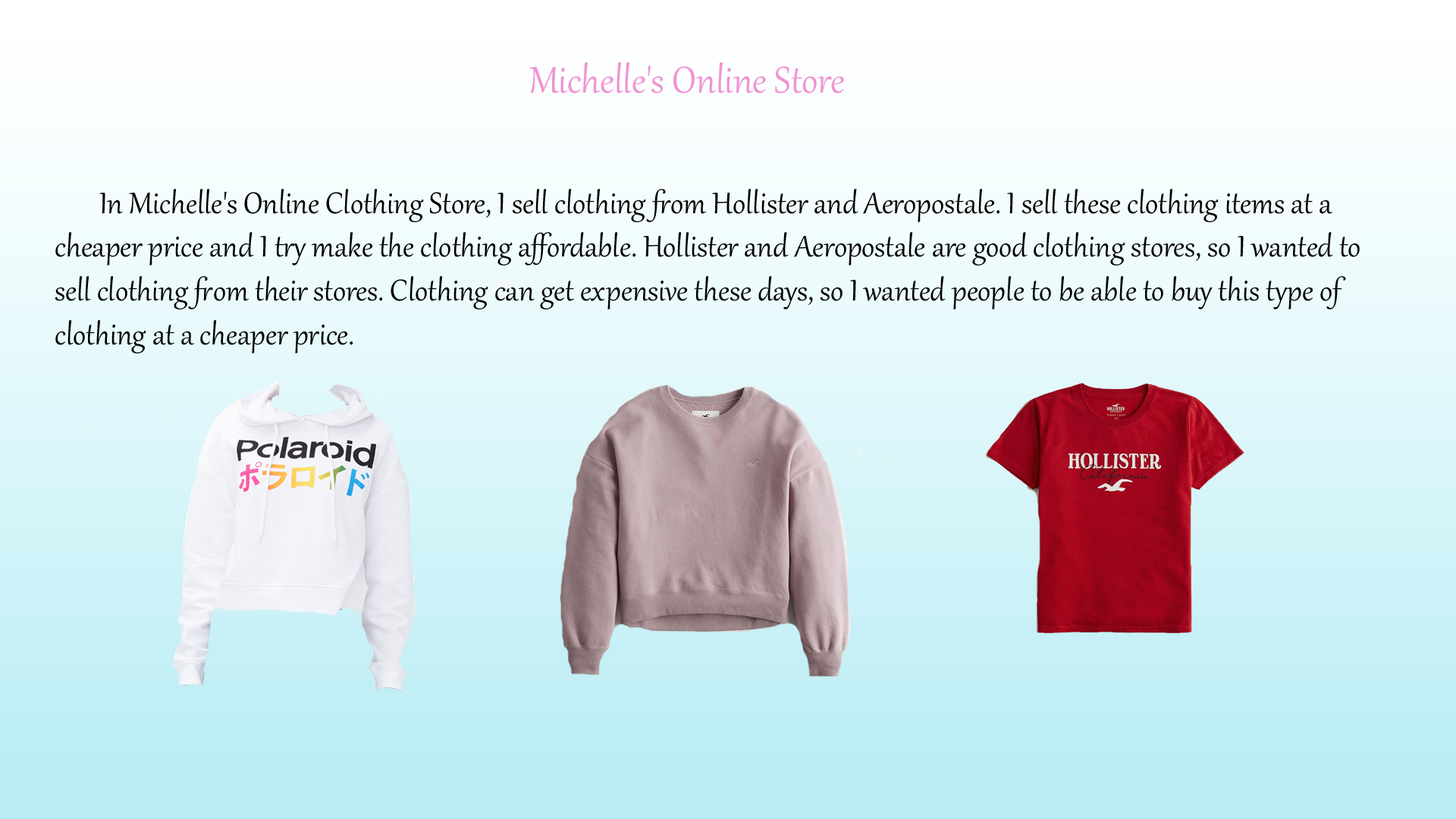
<style>
.page{position:relative;width:1456px;height:819px}
.page>*{position:absolute;margin:0}
.t1{font:45.5px "Gabriola";color:#f093d2}
.t2{font:45.5px "Gabriola";color:#000000}
.t3{font:36.4px "Gabriola";color:#000000}
</style>
<div class="page">
<p class="t1" style="left:529px;top:62px;width:315px;height:31px">Michelle's Online Store<br><span class="t2">O</span></p>
<p class="t3" style="left:55px;top:189px;width:1305px;height:164px">In Michelle's Online Clothing Store, I sell clothing from Hollister and Aeropostale. I sell these clothing items at a cheaper price and I try make the clothing affordable. Hollister and Aeropostale are good clothing stores, so I wanted to sell clothing from their stores. Clothing can get expensive these days, so I wanted people to be able to buy this type of clothing at a cheaper price.</p>
</div>
